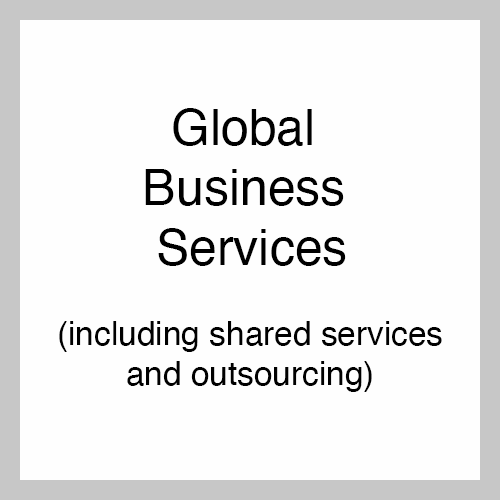
<style>
.page{position:relative;width:500px;height:500px;background:#fefefe}
.page>*{position:absolute;margin:0}
.t1{font:33.3px "Helvetica";color:#000000}
.t2{font:50px "Helvetica";color:#000000}
</style>
<div class="page">
<p class="t1" style="left:59px;top:108px;width:383px;height:284px;text-align:center"><span class="t2">Global <br>Business <br>Services<br></span><br>(including shared services<br>and outsourcing)</p>
</div>
